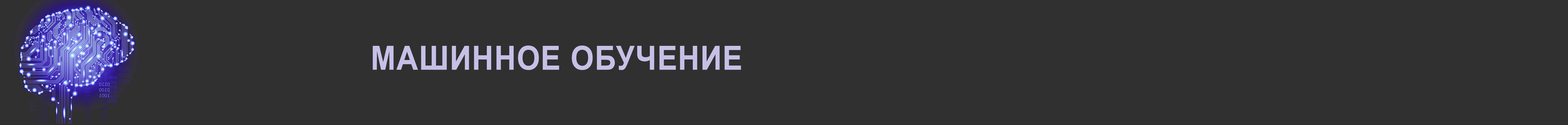
<style>
.page{position:relative;width:1568px;height:125px;background:#303030}
.page>*{position:absolute;margin:0}
.t1{font:33.3px "Arial-BoldMT";letter-spacing:0.025em;color:#c7c0e6;text-transform:uppercase;scale:0.9 1}
</style>
<div class="page">
<p class="t1" style="left:373px;top:45px;width:368px;height:25px">Машинное обучение</p>
</div>
